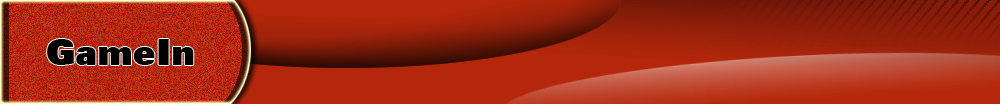
<style>
.page{position:relative;width:1000px;height:104px}
.page>*{position:absolute;margin:0}
.t1{font:36px "ZurichBT-ExtraBlack";color:#010101}
</style>
<div class="page">
<p class="t1" style="left:47px;top:39px;width:147px;height:26px">GameIn</p>
</div>
